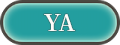
<style>
.page{position:relative;width:120px;height:45px;background:#239e9f}
.page>*{position:absolute;margin:0}
.t1{font:22px "RyuminPro-ExBold";letter-spacing:-0.08em;color:#fdfbf9}
</style>
<div class="page">
<p class="t1" style="left:44px;top:14px;width:31px;height:17px">YA</p>
</div>
